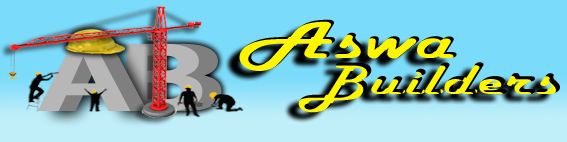
<style>
.page{position:relative;width:567px;height:142px;background:#7bdbfa}
.page>*{position:absolute;margin:0}
.t1{font:57.3px "HarlowSolid";color:#fef500;scale:1.54 1}
.t2{font:119.9px "Tunga-Bold";color:#b7b7b7;scale:1.45 1}
.t3{font:47.2px "HarlowSolid";scale:1.53 1}
</style>
<div class="page">
<p class="t1" style="left:239px;top:19px;width:218px;height:52px">Aswa</p>
<p class="t2" style="left:37px;top:44px;width:94px;height:67px">A</p>
<p class="t3" style="left:298px;top:62px;width:262px;height:51px">Builders</p>
</div>
